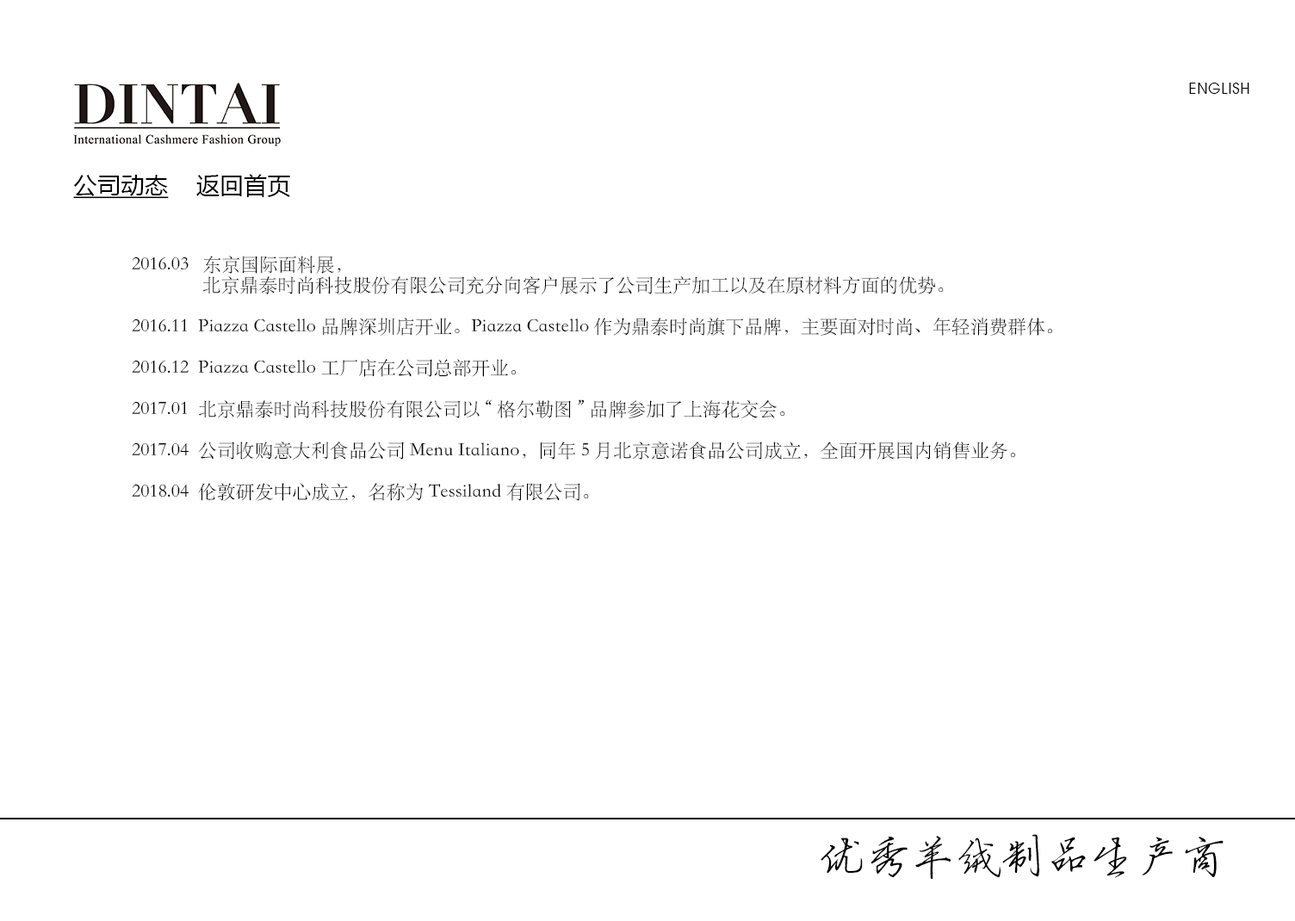
<style>
.page{position:relative;width:1295px;height:921px;background:#ffffff}
.page>*{position:absolute;margin:0}
.t1{font:15.5px "AvantGardeITCbyBT-Book";letter-spacing:0.05em;color:#000000}
.t2{font:23.7px "MicrosoftYaHei";color:#000000;text-decoration:underline}
.t3{font:23.7px "MicrosoftYaHei";color:#000000}
.t4{font:18.8px/20.7px "STSong";color:#000000}
.t5{font:45.3px "FZYBXSJW--GB1-0";color:#000000}
</style>
<div class="page">
<p class="t1" style="left:1189px;top:83px;width:60px;height:11px">ENGLISH</p>
<p class="t2" style="left:73px;top:174px;width:217px;height:25px">公司动态<span class="t3">    返回首页</span></p>
<p class="t4" style="left:132px;top:256px;width:921px;height:245px">2016.03   东京国际面料展，<br>               北京鼎泰时尚科技股份有限公司充分向客户展示了公司生产加工以及在原材料方面的优势。<br><br>2016.11  Piazza Castello品牌深圳店开业。Piazza Castello作为鼎泰时尚旗下品牌，主要面对时尚、年轻消费群体。<br><br>2016.12  Piazza Castello工厂店在公司总部开业。<br><br>2017.01  北京鼎泰时尚科技股份有限公司以“格尔勒图”品牌参加了上海花交会。<br><br>2017.04  公司收购意大利食品公司Menu Italiano，同年5月北京意诺食品公司成立，全面开展国内销售业务。<br><br>2018.04  伦敦研发中心成立，名称为Tessiland有限公司。</p>
<p class="t5" style="left:820px;top:834px;width:403px;height:46px">优秀羊绒制品生产商</p>
</div>
